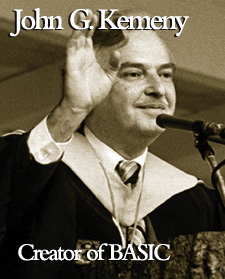
<style>
.page{position:relative;width:225px;height:279px}
.page>*{position:absolute;margin:0}
.t1{font:31.2px "BemboMT-SemiBold";letter-spacing:-0.08em;color:#ffffff;scale:0.95 1}
.t2{font:25px "BemboMT-SemiBold";letter-spacing:-0.08em;color:#ffffff;scale:0.95 1}
</style>
<div class="page">
<p class="t1" style="left:9px;top:8px;width:180px;height:29px">John G. Kemeny</p>
<p class="t2" style="left:18px;top:243px;width:153px;height:18px">Creator of BASIC</p>
</div>
